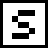
<style>
.page{position:relative;width:48px;height:48px;background:#ffffff}
.page>*{position:absolute;margin:0}
.t1{font:48px "Silkscreen";letter-spacing:-0.05em;color:#000000}
</style>
<div class="page">
<p class="t1" style="left:12px;top:10px;width:23px;height:29px">S</p>
</div>
